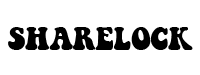
<style>
.page{position:relative;width:200px;height:75px;background:#ffffff}
.page>*{position:absolute;margin:0}
.t1{font:30px "KeeponTruckin";color:#000000}
</style>
<div class="page">
<p class="t1" style="left:8px;top:27px;width:185px;height:23px">SHARELOCK</p>
</div>
